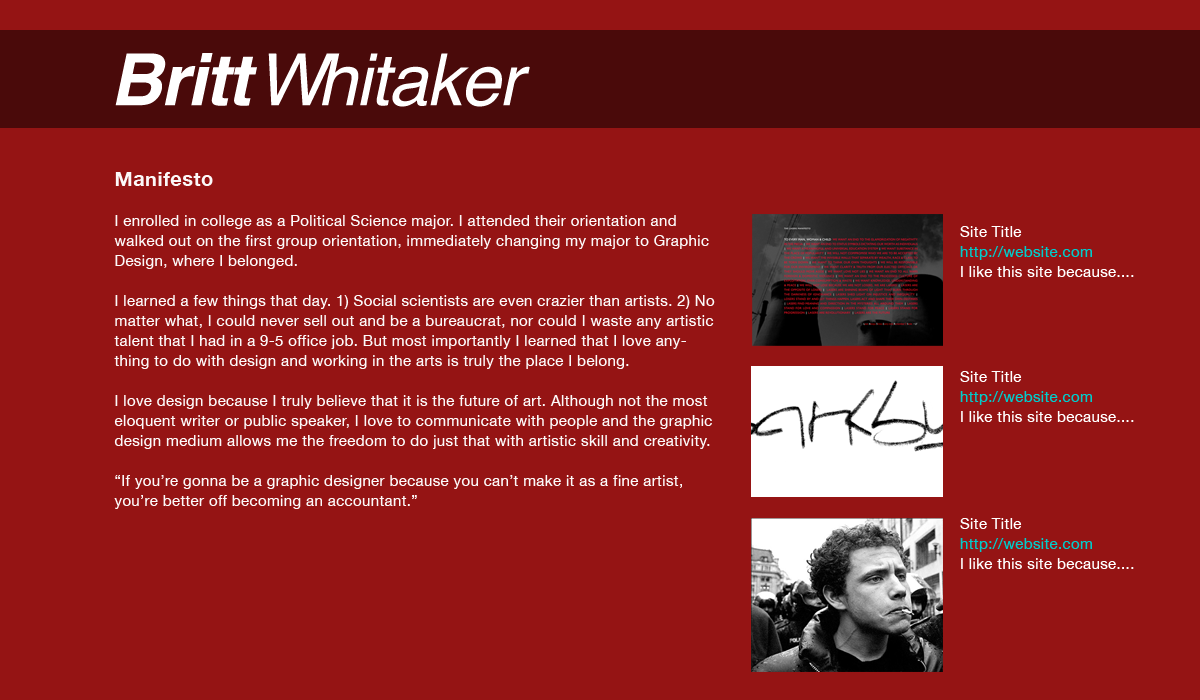
<style>
.page{position:relative;width:1200px;height:700px;background:#951414}
.page>*{position:absolute;margin:0}
.t1{font:72px "Helvetica-Oblique";letter-spacing:-0.025em;color:#ffffff}
.t2{font:72px "Helvetica-BoldOblique";letter-spacing:-0.025em;color:#ffffff}
.t3{font:72px "Helvetica-BoldOblique";letter-spacing:-0.1em;color:#ffffff}
.t4{font:72px "Helvetica-Oblique";letter-spacing:-0.1em;color:#ffffff}
.t5{font:15px/20px "HelveticaNeue";letter-spacing:0.025em;color:#fcf9f9}
.t6{font:20px/20px "HelveticaNeue-Bold";letter-spacing:0.025em;color:#fcf9f9}
.t7{font:15px/20px "HelveticaNeue";letter-spacing:0.025em;color:#ffffff}
.t8{font:15px/20px "HelveticaNeue";letter-spacing:0.025em;color:#00cccc}
</style>
<div class="page">
<p class="t1" style="left:115px;top:53px;width:415px;height:54px"><span class="t2">Brit</span><span class="t3">t </span><span class="t4">W</span>hitaker</p>
<p class="t5" style="left:114px;top:172px;width:601px;height:337px"><span class="t6">Manifesto <br></span><br>I enrolled in college as a Political Science major. I attended their orientation and walked out on the first group orientation, immediately changing my major to Graphic Design, where I belonged. <br><br>I learned a few things that day. 1) Social scientists are even crazier than artists. 2) No matter what, I could never sell out and be a bureaucrat, nor could I waste any artistic talent that I had in a 9-5 office job. But most importantly I learned that I love anything to do with design and working in the arts is truly the place I belong.<br><br>I love design because I truly believe that it is the future of art. Although not the most eloquent writer or public speaker, I love to communicate with people and the graphic design medium allows me the freedom to do just that with artistic skill and creativity.<br><br>“If you’re gonna be a graphic designer because you can’t make it as a fine artist, you’re better off becoming an accountant.”</p>
<p class="t7" style="left:960px;top:226px;width:174px;height:51px">Site Title<br><span class="t8">http://website.com<br></span>I like this site because....</p>
<p class="t7" style="left:960px;top:371px;width:174px;height:51px">Site Title<br><span class="t8">http://website.com<br></span>I like this site because....</p>
<p class="t7" style="left:960px;top:518px;width:174px;height:51px">Site Title<br><span class="t8">http://website.com<br></span>I like this site because....</p>
</div>
